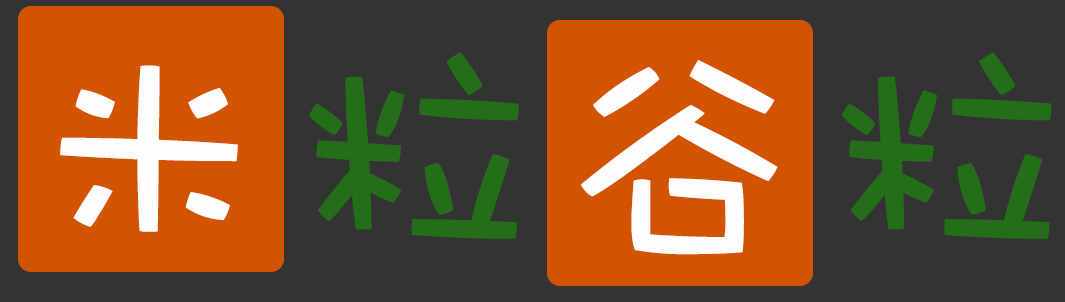
<style>
.page{position:relative;width:1065px;height:302px;background:#333333}
.page>*{position:absolute;margin:0}
.t1{font:260px "DFWaWaSC-W5";letter-spacing:0.025em;color:#fffdfd}
.t2{font:260px "DFWaWaSC-W5";letter-spacing:0.025em;color:#246e1a}
</style>
<div class="page">
<p class="t1" style="left:60px;top:52px;width:992px;height:203px">米<span class="t2">粒</span>谷<span class="t2">粒</span></p>
</div>
